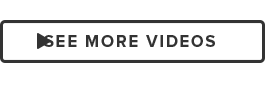
<style>
.page{position:relative;width:265px;height:85px;background:#ffffff}
.page>*{position:absolute;margin:0}
.t1{font:17px "ProximaNova-Bold";letter-spacing:0.1em;color:#333333}
</style>
<div class="page">
<p class="t1" style="left:44px;top:35px;width:171px;height:12px">SEE MORE VIDEOS</p>
</div>
